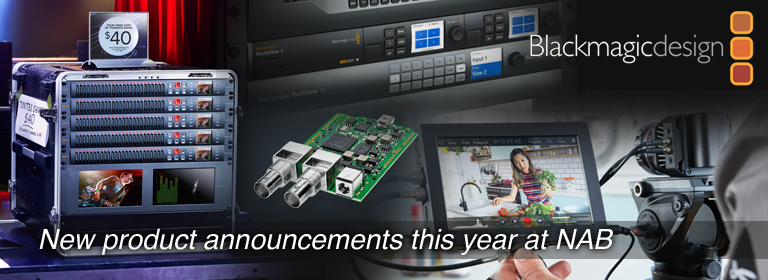
<style>
.page{position:relative;width:768px;height:280px}
.page>*{position:absolute;margin:0}
.t1{font:28px "Helvetica-Oblique";color:#ffffff}
</style>
<div class="page">
<p class="t1" style="left:39px;top:228px;width:574px;height:27px">New product announcements this year at NAB</p>
</div>
